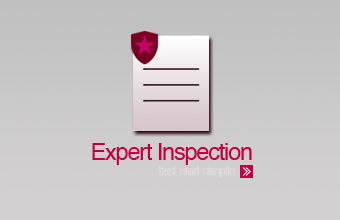
<style>
.page{position:relative;width:340px;height:220px}
.page>*{position:absolute;margin:0}
.t1{font:23.6px "Helvetica";letter-spacing:-0.05em;color:#c10042}
.t2{font:11.6px "Helvetica";letter-spacing:-0.01em;color:#bdbcbc}
</style>
<div class="page">
<p class="t1" style="left:92px;top:143px;width:160px;height:22px">Expert Inspection</p>
<p class="t2" style="left:158px;top:166px;width:77px;height:11px">fast and simple</p>
</div>
